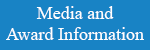
<style>
.page{position:relative;width:150px;height:50px;background:#1883c5}
.page>*{position:absolute;margin:0}
.t1{font:18px "TimesNewRomanPSMT";color:#ffffff}
</style>
<div class="page">
<p class="t1" style="left:6px;top:6px;width:138px;height:34px;text-align:center">Media and <br>Award Information</p>
</div>
